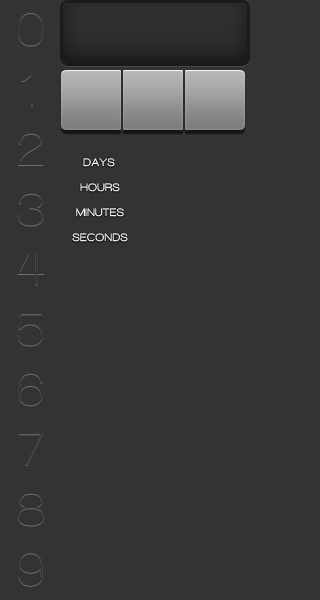
<style>
.page{position:relative;width:320px;height:600px;background:#333333}
.page>*{position:absolute;margin:0}
.t1{font:11px "WalkwayUltraBold";letter-spacing:0.1em;color:#ffffff}
.t2{font:11px "WalkwayUltraBold";letter-spacing:0.1em}
</style>
<div class="page">
<p class="t1" style="left:83px;top:158px;width:32px;height:9px">DAYS</p>
<p class="t1" style="left:80px;top:183px;width:40px;height:9px">HOURS</p>
<p class="t2" style="left:76px;top:208px;width:48px;height:9px">MINUTES</p>
<p class="t2" style="left:72px;top:233px;width:56px;height:9px">SECONDS</p>
</div>
